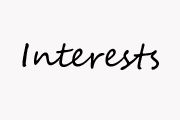
<style>
.page{position:relative;width:180px;height:120px;background:#f9f7f7}
.page>*{position:absolute;margin:0}
.t1{font:33.2px "SegoeScript";color:#000000}
</style>
<div class="page">
<p class="t1" style="left:22px;top:43px;width:137px;height:27px">Interests</p>
</div>
